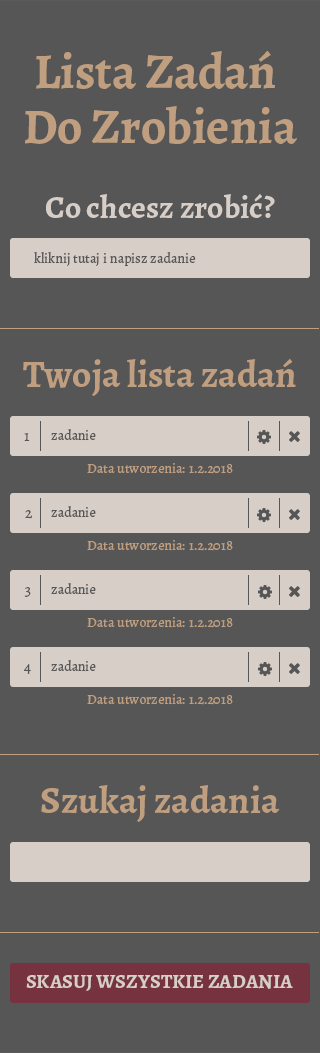
<style>
.page{position:relative;width:320px;height:1053px;background:#565656}
.page>*{position:absolute;margin:0}
.t1{font:50px/54.9px "Alegreya-Bold";color:#c09f80}
.t2{font:32px "Alegreya-Bold";color:#d7cec7}
.t3{font:14px "Alegreya-Regular";color:#565656}
.t4{font:38px "Alegreya-Bold";color:#c09f80}
.t5{font:16px "Alegreya-Regular";color:#565656}
.t6{font:14px "Alegreya-Regular";color:#c09f80}
.t7{font:20px "Alegreya-Bold";color:#d7cec7;text-transform:uppercase}
</style>
<div class="page">
<p class="t1" style="left:25px;top:51px;width:272px;height:93px;text-align:center">Lista Zadań <br>Do Zrobienia</p>
<p class="t2" style="left:46px;top:194px;width:229px;height:25px">Co chcesz zrobić?</p>
<p class="t3" style="left:34px;top:252px;width:162px;height:14px">kliknij tutaj i napisz zadanie</p>
<p class="t4" style="left:23px;top:359px;width:273px;height:37px">Twoja lista zadań</p>
<p class="t5" style="left:24px;top:433px;width:6px;height:9px">1</p>
<p class="t3" style="left:51px;top:429px;width:45px;height:12px">zadanie</p>
<p class="t6" style="left:87px;top:463px;width:146px;height:11px">Data utworzenia: 1.2.2018</p>
<p class="t5" style="left:25px;top:510px;width:8px;height:9px">2</p>
<p class="t3" style="left:51px;top:506px;width:45px;height:12px">zadanie</p>
<p class="t6" style="left:87px;top:540px;width:146px;height:11px">Data utworzenia: 1.2.2018</p>
<p class="t5" style="left:24px;top:587px;width:7px;height:10px">3</p>
<p class="t3" style="left:51px;top:583px;width:45px;height:12px">zadanie</p>
<p class="t6" style="left:87px;top:617px;width:146px;height:11px">Data utworzenia: 1.2.2018</p>
<p class="t5" style="left:24px;top:664px;width:7px;height:10px">4</p>
<p class="t3" style="left:51px;top:660px;width:45px;height:12px">zadanie</p>
<p class="t6" style="left:87px;top:694px;width:146px;height:11px">Data utworzenia: 1.2.2018</p>
<p class="t4" style="left:41px;top:785px;width:239px;height:37px">Szukaj zadania</p>
<p class="t7" style="left:26px;top:975px;width:267px;height:16px">Skasuj wszystkie zadania</p>
</div>
